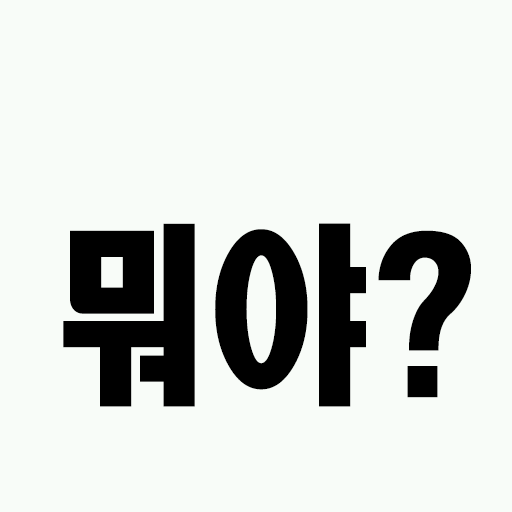
<style>
.page{position:relative;width:512px;height:512px;background:#f8fcf8}
.page>*{position:absolute;margin:0}
.t1{font:190px "HeadlineR-HM";color:#000000;scale:0.84 1}
</style>
<div class="page">
<p class="t1" style="left:63px;top:223px;width:408px;height:184px">뭐야?</p>
</div>
